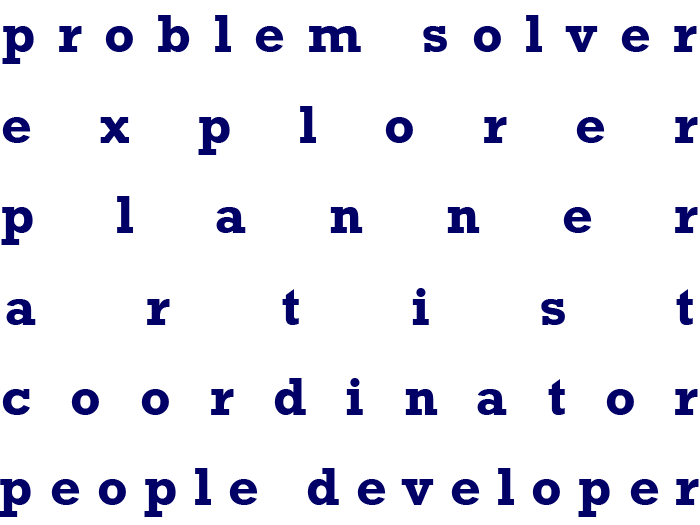
<style>
.page{position:relative;width:700px;height:525px;background:#ffffff}
.page>*{position:absolute;margin:0}
.t1{font:50px "Rockwell-Bold";letter-spacing:0.47em;color:#000066}
.t2{font:50px "Rockwell-Bold";letter-spacing:1.37em;color:#000066}
.t3{font:50px "Rockwell-Bold";letter-spacing:1.65em;color:#000066}
.t4{font:50px "Rockwell-Bold";letter-spacing:2.2em;color:#000066}
.t5{font:50px "Rockwell-Bold";letter-spacing:0.785em;color:#000066}
.t6{font:50px "Rockwell-Bold";letter-spacing:0.34em;color:#000066}
</style>
<div class="page">
<p class="t1" style="left:2px;top:15px;width:695px;height:49px">problem solver</p>
<p class="t2" style="left:2px;top:106px;width:696px;height:49px">explorer</p>
<p class="t3" style="left:1px;top:196px;width:697px;height:49px">planner</p>
<p class="t4" style="left:6px;top:288px;width:687px;height:37px">artist</p>
<p class="t5" style="left:2px;top:378px;width:696px;height:37px">coordinator</p>
<p class="t6" style="left:0px;top:468px;width:699px;height:49px">people developer</p>
</div>
